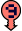
<style>
.page{position:relative;width:22px;height:31px;background:#ffffff}
.page>*{position:absolute;margin:0}
.t1{font:21.8px "04b03";color:#000033}
</style>
<div class="page">
<p class="t1" style="left:6px;top:2px;width:13px;height:22px">9</p>
</div>
